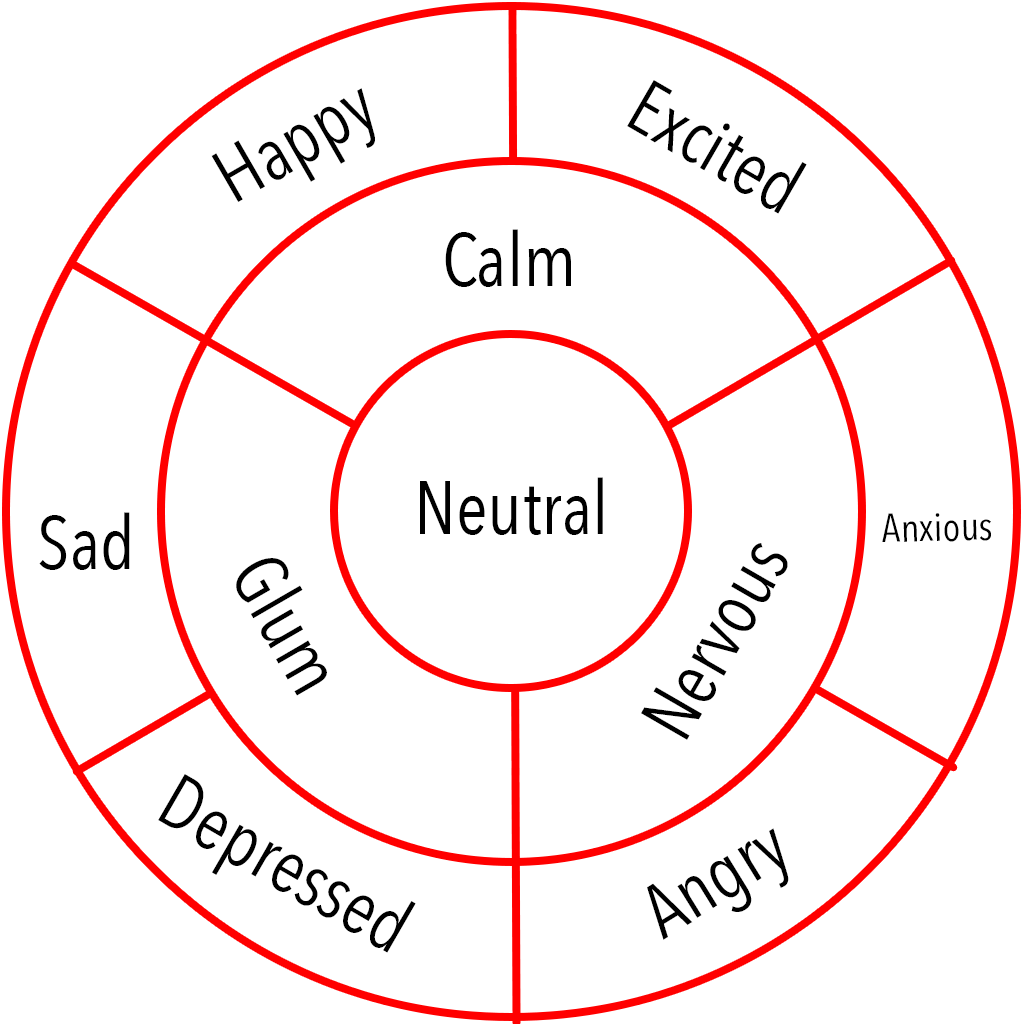
<style>
.page{position:relative;width:1024px;height:1024px;background:#ffffff}
.page>*{position:absolute;margin:0}
.t1{font:75px "AvenirNextCondensed-Regular";color:#000000}
.t2{font:39.7px "AvenirNextCondensed-Regular";color:#000000}
</style>
<div class="page">
<p class="t1" style="left:211px;top:88px;width:164px;height:114px;rotate:-30deg">Happy</p>
<p class="t1" style="left:627px;top:80px;width:180px;height:134px;rotate:30deg">Excited</p>
<p class="t1" style="left:445px;top:229px;width:126px;height:58px">Calm</p>
<p class="t1" style="left:420px;top:477px;width:183px;height:58px">Neutral</p>
<p class="t1" style="left:39px;top:512px;width:91px;height:58px">Sad</p>
<p class="t2" style="left:882px;top:513px;width:109px;height:29px;rotate:-2deg">Anxious</p>
<p class="t1" style="left:641px;top:543px;width:147px;height:197px;rotate:-60deg">Nervous</p>
<p class="t1" style="left:236px;top:558px;width:91px;height:138px;rotate:60deg">Glum</p>
<p class="t1" style="left:158px;top:774px;width:258px;height:179px;rotate:30deg">Depressed</p>
<p class="t1" style="left:647px;top:828px;width:142px;height:112px;rotate:-32deg">Angry</p>
</div>
